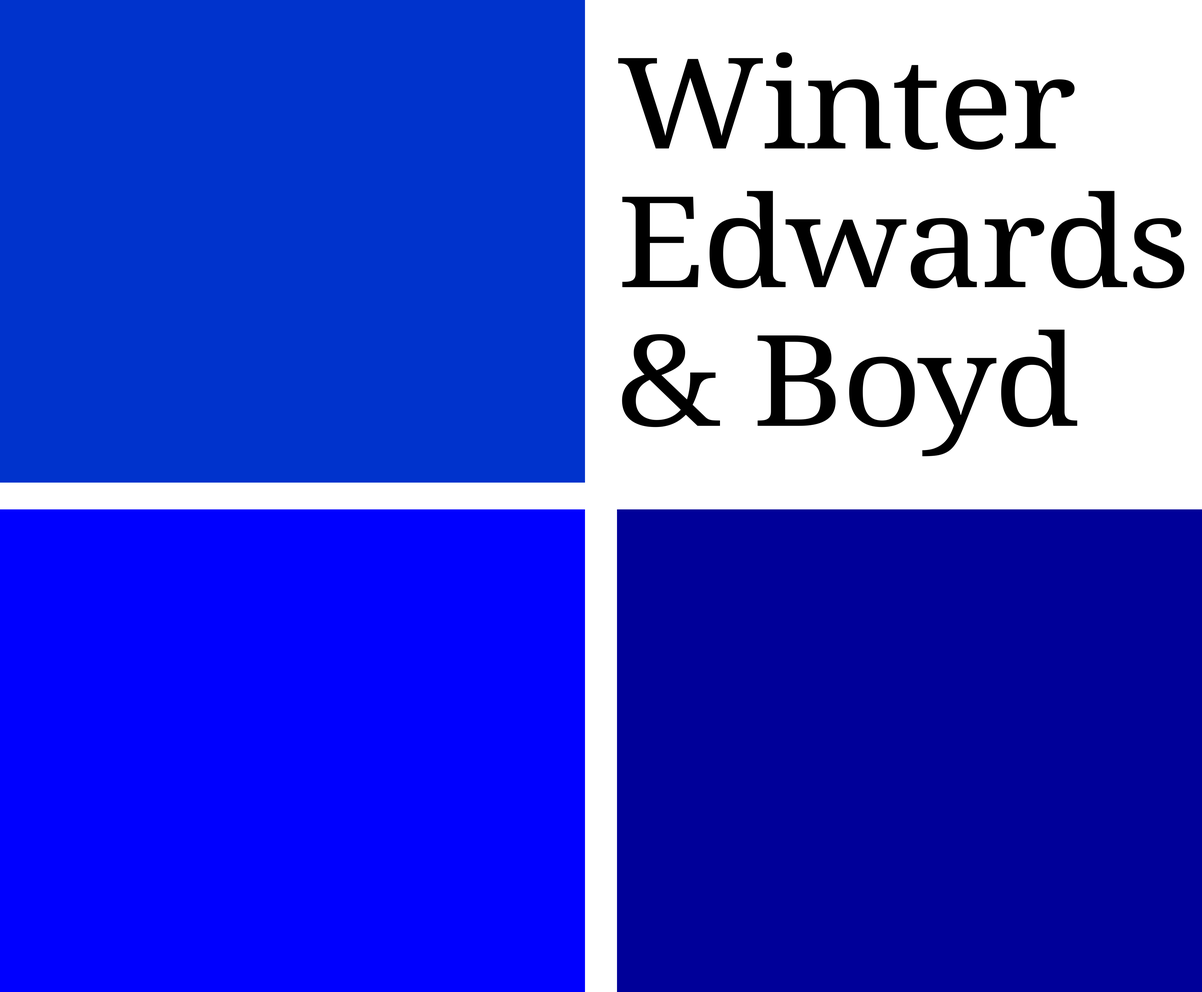
<style>
.page{position:relative;width:1202px;height:992px;background:#ffffff}
.page>*{position:absolute;margin:0}
.t1{font:126.6px/138.6px "DroidSerif";letter-spacing:-0.02em;color:#000000;scale:1.11 1}
</style>
<div class="page">
<p class="t1" style="left:618px;top:52px;width:566px;height:405px">Winter<br>Edwards<br>&amp; Boyd</p>
</div>
